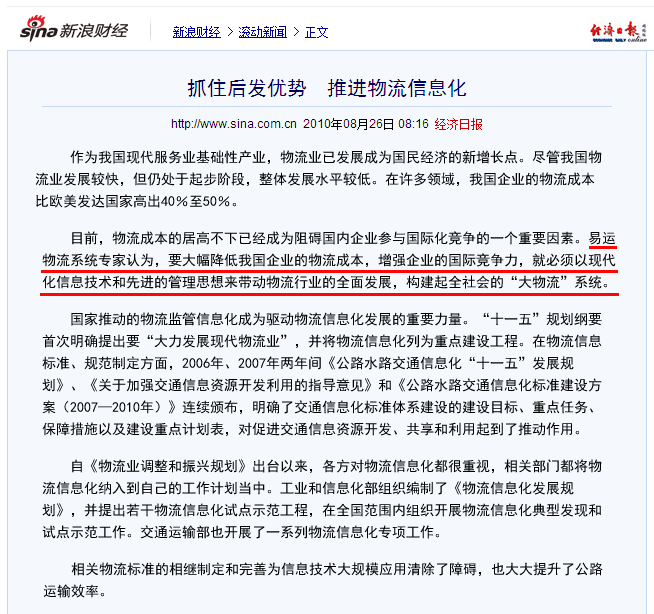
<style>
.page{position:relative;width:654px;height:614px;background:#f5f8fd}
.page>*{position:absolute;margin:0}
.t1{font:14px/22px "SimHei";color:#000000}
</style>
<div class="page">
<p class="t1" style="left:35px;top:150px;width:567px;height:58px">作为我国现代服务业基础性产业，物流业已发展成为国民经济的新增长点。尽管我国物<br>流业发展较快，但仍处于起步阶段，整体发展水平较低。在许多领域，我国企业的物流成本<br>比欧美发达国家高出40％至50％。</p>
<p class="t1" style="left:42px;top:231px;width:574px;height:58px">目前，物流成本的居高不下已经成为阻碍国内企业参与国际化竞争的一个重要因素。易运<br>物流系统专家认为，要大幅降低我国企业的物流成本，增强企业的国际竞争力，就必须以现代<br>化信息技术和先进的管理思想来带动物流行业的全面发展，构建起全社会的“大物流”系统。</p>
<p class="t1" style="left:42px;top:312px;width:560px;height:124px">国家推动的物流监管信息化成为驱动物流信息化发展的重要力量。“十一五”规划纲要<br>首次明确提出要“大力发展现代物流业”，并将物流信息化列为重点建设工程。在物流信息<br>标准、规范制定方面，2006年、2007年两年间《公路水路交通信息化“十一五”发展规<br>划》、《关于加强交通信息资源开发利用的指导意见》和《公路水路交通信息化标准建设方<br>案（2007—2010年）》连续颁布，明确了交通信息化标准体系建设的建设目标、重点任务、<br>保障措施以及建设重点计划表，对促进交通信息资源开发、共享和利用起到了推动作用。</p>
<p class="t1" style="left:42px;top:459px;width:560px;height:80px">自《物流业调整和振兴规划》出台以来，各方对物流信息化都很重视，相关部门都将物<br>流信息化纳入到自己的工作计划当中。工业和信息化部组织编制了《物流信息化发展规<br>划》，并提出若干物流信息化试点示范工程，在全国范围内组织开展物流信息化典型发现和<br>试点示范工作。交通运输部也开展了一系列物流信息化专项工作。</p>
<p class="t1" style="left:43px;top:562px;width:560px;height:36px">相关物流标准的相继制定和完善为信息技术大规模应用清除了障碍，也大大提升了公路<br>运输效率。</p>
</div>
